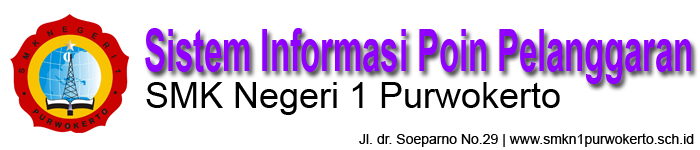
<style>
.page{position:relative;width:700px;height:150px;background:#ffffff}
.page>*{position:absolute;margin:0}
.t1{font:58.3px "Arial-BoldMT";color:#9000ff;scale:0.56 1}
.t2{font:36px "ArialMT";color:#000000}
.t3{font:14px "ArialMT";color:#000000}
</style>
<div class="page">
<p class="t1" style="left:145px;top:28px;width:546px;height:56px">Sistem Informasi Poin Pelanggaran</p>
<p class="t2" style="left:146px;top:82px;width:414px;height:33px">SMK Negeri 1 Purwokerto</p>
<p class="t3" style="left:359px;top:133px;width:335px;height:14px">Jl. dr. Soeparno No.29 | www.smkn1purwokerto.sch.id</p>
</div>
